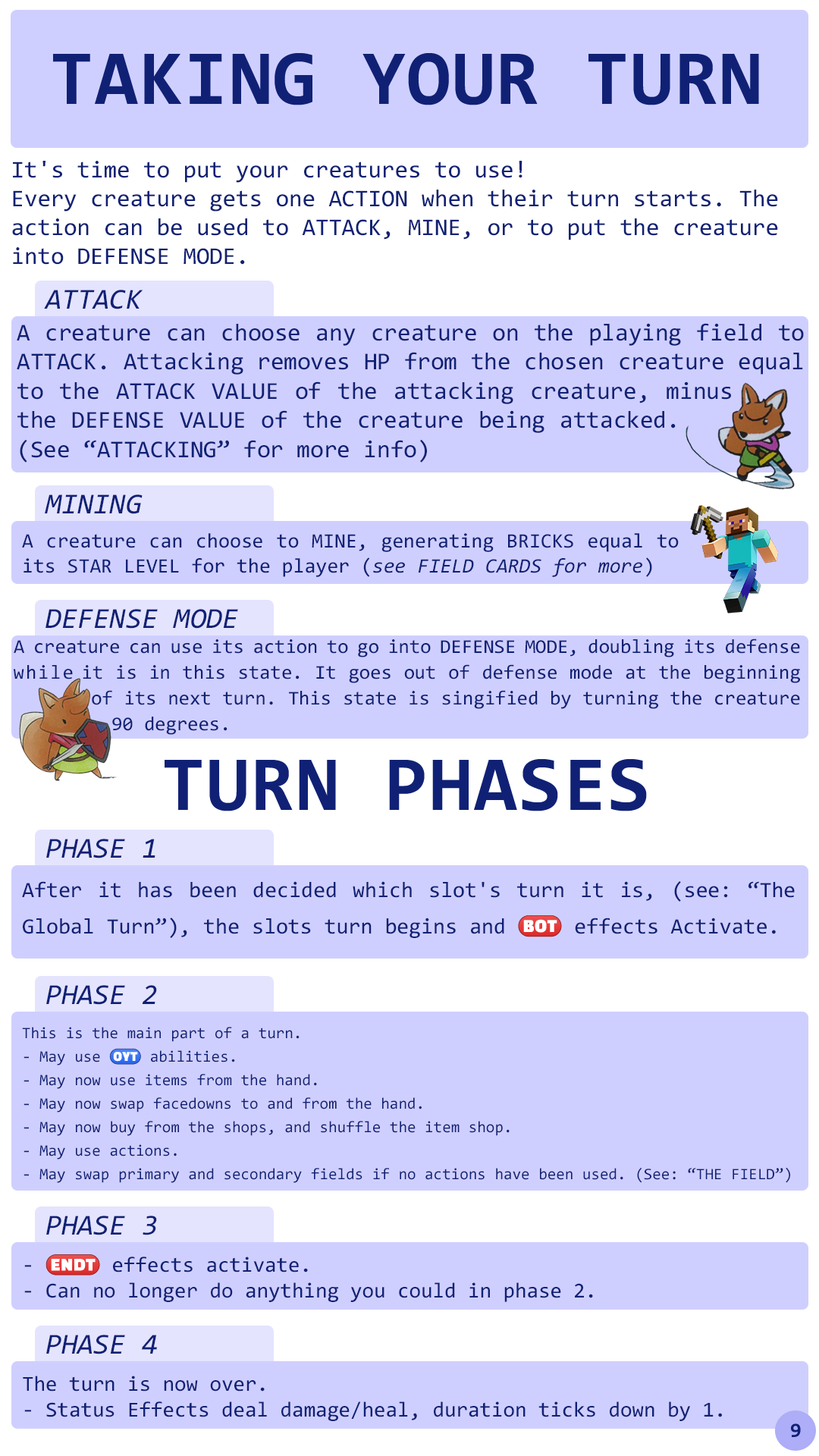
<style>
.page{position:relative;width:819px;height:1456px;background:#cfcfff}
.page>*{position:absolute;margin:0}
.t1{font:78.3px "Consolas-Bold";letter-spacing:0.02em;color:#102175}
.t2{font:24.1px "Consolas";color:#102175}
.t3{font:29.2px "Consolas-Italic";color:#102175}
.t4{font:24.3px "Consolas";color:#102175}
.t5{font:20.6px "Consolas";color:#102175}
.t6{font:20.6px "Consolas-Italic";color:#102175}
.t7{font:19.7px/25.8px "Consolas";color:#102175}
.t8{font:22px/36.4px "Consolas";color:#102175}
.t9{font:22px/36.4px "stoogedings-Regular";color:#102175}
.t10{font:15.9px/23.5px "Consolas";color:#102175}
.t11{font:15.9px/23.5px "stoogedings-Regular";color:#102175}
.t12{font:21.3px "Consolas"}
.t13{font:21.3px "stoogedings-Regular"}
.t14{font:21.3px "Consolas";color:#102175}
.t15{font:20.5px "Consolas-Bold";letter-spacing:-0.06em;color:#102175}
</style>
<div class="page">
<p class="t1" style="left:53px;top:53px;width:706px;height:52px">TAKING YOUR TURN</p>
<p class="t2" style="left:12px;top:161px;width:766px;height:104px">It's time to put your creatures to use!<br>Every creature gets one ACTION when their turn starts. The action can be used to ATTACK, MINE, or to put the creature into DEFENSE MODE.</p>
<p class="t3" style="left:44px;top:290px;width:99px;height:19px">ATTACK</p>
<p class="t4" style="left:17px;top:323px;width:787px;height:140px;text-align:justify">A creature can choose any creature on the playing field to ATTACK. Attacking removes HP from the chosen creature equal to the ATTACK VALUE of the attacking creature, minus the DEFENSE VALUE of the creature being attacked. (See “ATTACKING” for more info)</p>
<p class="t3" style="left:45px;top:494px;width:98px;height:20px">MINING</p>
<p class="t5" style="left:22px;top:533px;width:657px;height:44px;text-align:justify">A creature can choose to MINE, generating BRICKS equal to its STAR LEVEL for the player (<span class="t6">see FIELD CARDS for more</span>)</p>
<p class="t3" style="left:45px;top:609px;width:193px;height:20px">DEFENSE MODE</p>
<p class="t7" style="left:14px;top:639px;width:786px;height:96px;text-align:justify">A creature can use its action to go into DEFENSE MODE, doubling its defense while it is in this state. It goes out of defense mode at the beginning of its next turn. This state is singified by turning the creature 90 degrees.</p>
<p class="t1" style="left:165px;top:759px;width:482px;height:52px">TURN PHASES</p>
<p class="t3" style="left:46px;top:839px;width:109px;height:19px">PHASE 1</p>
<p class="t8" style="left:22px;top:881px;width:773px;height:57px;text-align:justify">After it has been decided which slot's turn it is, (see: “The Global Turn”), the slots turn begins and <span class="t9">(BOT)</span> effects Activate.</p>
<p class="t3" style="left:46px;top:985px;width:111px;height:20px">PHASE 2</p>
<p class="t10" style="left:22px;top:1027px;width:768px;height:156px;text-align:justify">This is the main part of a turn.<br>- May use <span class="t11">(OYT)</span> abilities.<br>- May now use items from the hand.<br>- May now swap facedowns to and from the hand.<br>- May now buy from the shops, and shuffle the item shop.<br>- May use actions.<br>- May swap primary and secondary fields if no actions have been used. (See: “THE FIELD”)</p>
<p class="t3" style="left:46px;top:1216px;width:111px;height:19px">PHASE 3</p>
<p class="t12" style="left:24px;top:1254px;width:569px;height:48px;text-align:justify">- <span class="t13">(ENDT)</span> effects activate.<br>- Can no longer do anything you could in phase 2.</p>
<p class="t3" style="left:46px;top:1335px;width:111px;height:19px">PHASE 4</p>
<p class="t14" style="left:23px;top:1376px;width:699px;height:45px;text-align:justify">The turn is now over.<br>- Status Effects deal damage/heal, duration ticks down by 1.</p>
<p class="t15" style="left:791px;top:1423px;width:10px;height:14px">9</p>
</div>
